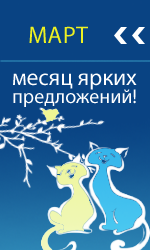
<style>
.page{position:relative;width:150px;height:250px;background:#094383}
.page>*{position:absolute;margin:0}
.t1{font:24px "MyriadPro-Regular";color:#edf122;text-transform:uppercase}
.t2{font:20px/18px "MyriadPro-Regular";color:#ffffff}
.t3{font:23px/18px "MyriadPro-Regular";color:#ffffff}
</style>
<div class="page">
<p class="t1" style="left:29px;top:26px;width:59px;height:17px">МАРТ</p>
<p class="t2" style="left:13px;top:73px;width:124px;height:34px"><span class="t3">месяц ярких <br></span>предложений!</p>
</div>
